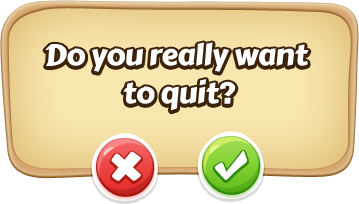
<style>
.page{position:relative;width:359px;height:204px}
.page>*{position:absolute;margin:0}
.t1{font:30px/38px "CarterOne";letter-spacing:-0.02em;color:#ffffff}
</style>
<div class="page">
<p class="t1" style="left:45px;top:42px;width:264px;height:69px;text-align:center">Do you really want <br>to quit?</p>
</div>
